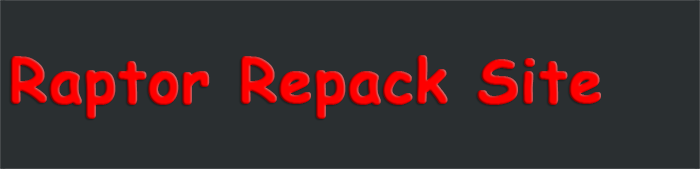
<style>
.page{position:relative;width:700px;height:169px;background:#2a2f31}
.page>*{position:absolute;margin:0}
.t1{font:60px "ComicSansMS-Bold";color:#ff0000;font-weight:bold}
</style>
<div class="page">
<p class="t1" style="left:10px;top:55px;width:591px;height:64px">Raptor Repack Site</p>
</div>
